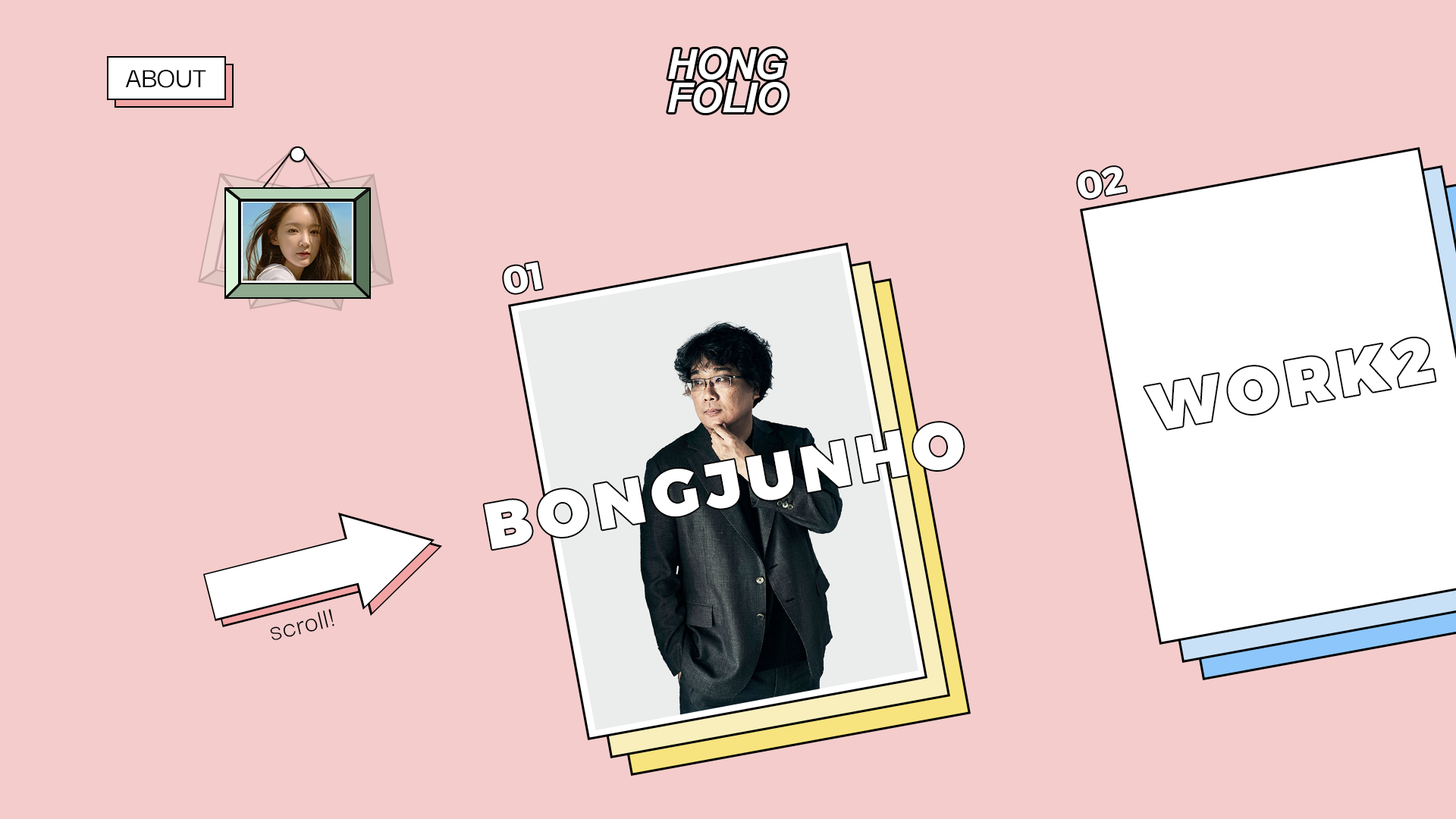
<style>
.page{position:relative;width:1456px;height:819px;background:#f4cccc}
.page>*{position:absolute;margin:0}
.t1{font:40.8px/33.1px "Arial-BoldItalicMT";letter-spacing:-0.03em;color:#ffffff}
.t2{font:30.3px "DarkerGrotesque-Medium";letter-spacing:-0.01em;color:#000000}
.t3{font:37.9px "Montserrat-Bold";letter-spacing:-0.01em;color:#ffffff}
.t4{font:64.6px "Montserrat-Black";letter-spacing:0.1em;color:#ffffff}
.t5{font:30.3px "DarkerGrotesque-Regular";letter-spacing:0.02em;color:#000000}
</style>
<div class="page">
<p class="t1" style="left:668px;top:49px;width:120px;height:64px">HONG<br>FOLIO</p>
<p class="t2" style="left:125px;top:70px;width:81px;height:18px">ABOUT</p>
<p class="t3" style="left:1078px;top:167px;width:49px;height:32px;rotate:-10deg">02</p>
<p class="t3" style="left:504px;top:262px;width:38px;height:31px;rotate:-10deg">01</p>
<p class="t4" style="left:484px;top:422px;width:480px;height:128px;rotate:-10deg">BONGJUNHO</p>
<p class="t5" style="left:270px;top:609px;width:64px;height:31px;rotate:-13deg">scroll!</p>
</div>
